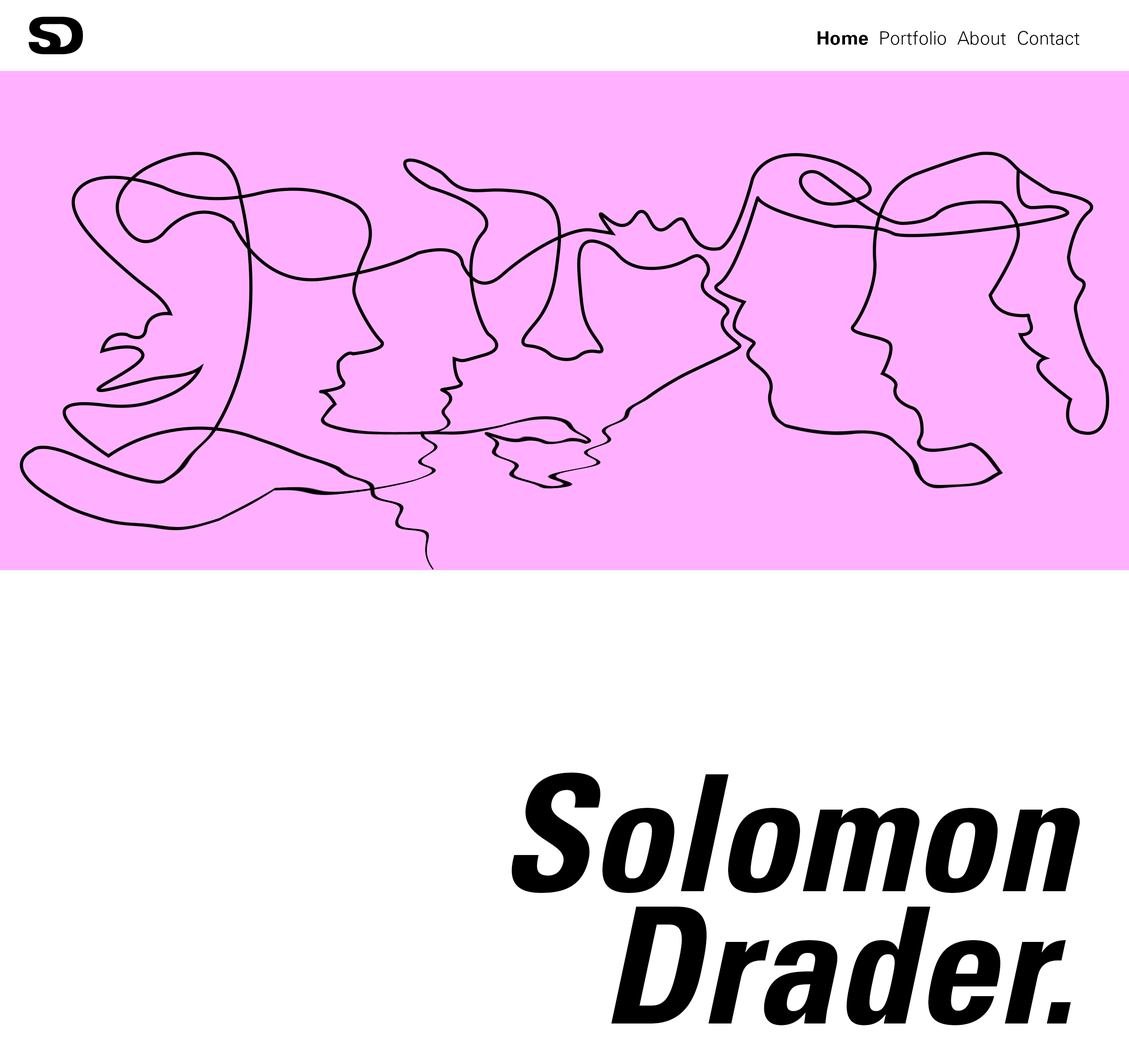
<style>
.page{position:relative;width:1129px;height:1057px;background:#ffffff}
.page>*{position:absolute;margin:0}
.t1{font:18.4px "Univers-Light";color:#000000}
.t2{font:18.4px "Univers-Bold";color:#000000}
.t3{font:161.7px/132.2px "Univers-CondensedBoldOblique";color:#000000}
</style>
<div class="page">
<p class="t1" style="left:817px;top:31px;width:262px;height:14px"><span class="t2">Home</span>  Portfolio  About  Contact</p>
<p class="t3" style="left:511px;top:772px;width:569px;height:253px;text-align:right">Solomon<br>Drader.</p>
</div>
